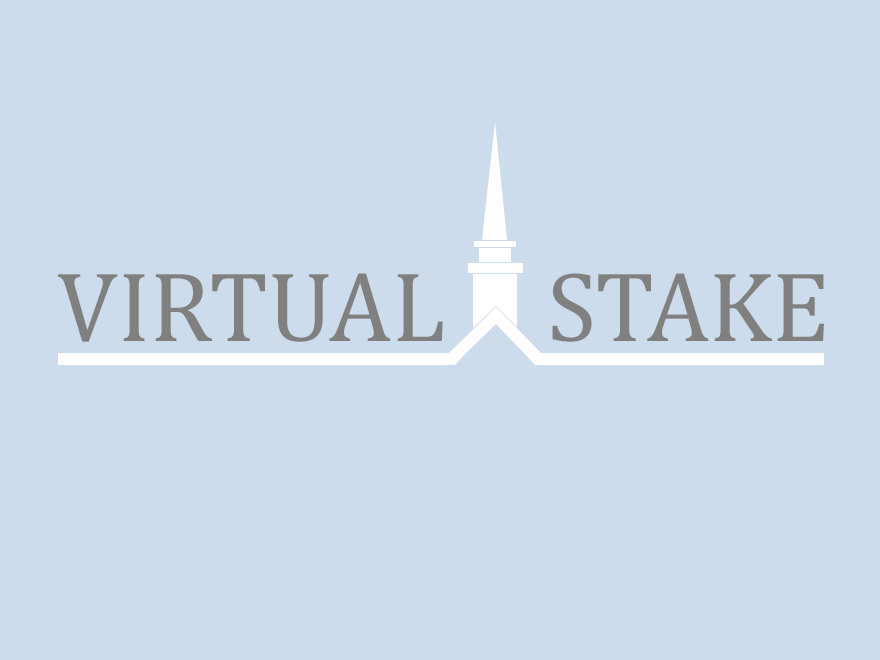
<style>
.page{position:relative;width:880px;height:660px;background:#cddcec}
.page>*{position:absolute;margin:0}
.t1{font:100px "Cambria";color:#808080}
</style>
<div class="page">
<p class="t1" style="left:58px;top:273px;width:385px;height:69px">VIRTUAL</p>
<p class="t1" style="left:552px;top:273px;width:272px;height:69px">STAKE</p>
</div>
